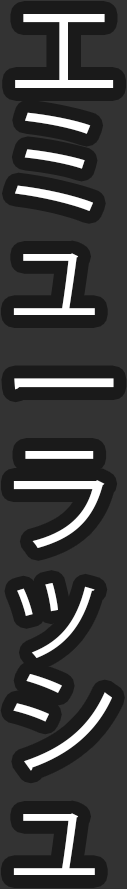
<style>
.page{position:relative;width:127px;height:889px;background:#333333}
.page>*{position:absolute;margin:0}
.t1{font:118.5px/112px "KozGoPr6N-Regular";color:#ffffff}
.t2{font:118.5px/112px "Magneto-Bold";color:#ffffff}
</style>
<div class="page">
<p class="t1" style="left:13px;top:14px;width:101px;height:861px"><span class="t2"><br></span>エ<br>ミ<br>ュ<br>ー<br>ラ<br>ッ<br>シ<br>ュ</p>
</div>
